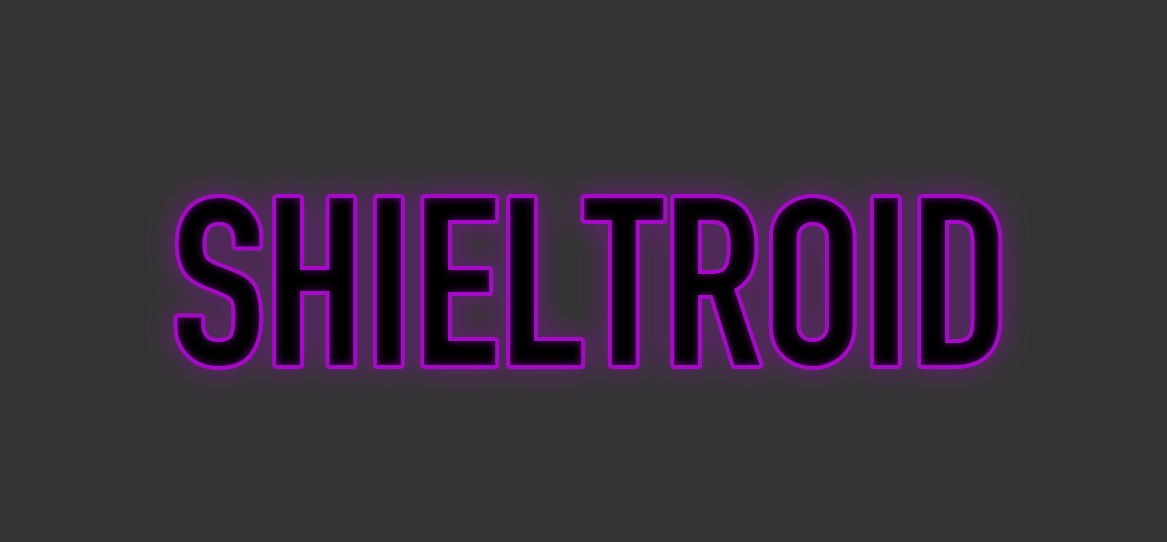
<style>
.page{position:relative;width:1167px;height:542px;background:#333333}
.page>*{position:absolute;margin:0}
.t1{font:233.7px "DINEngschrift";color:#080009}
</style>
<div class="page">
<p class="t1" style="left:177px;top:198px;width:822px;height:168px">SHIELTROID</p>
</div>
